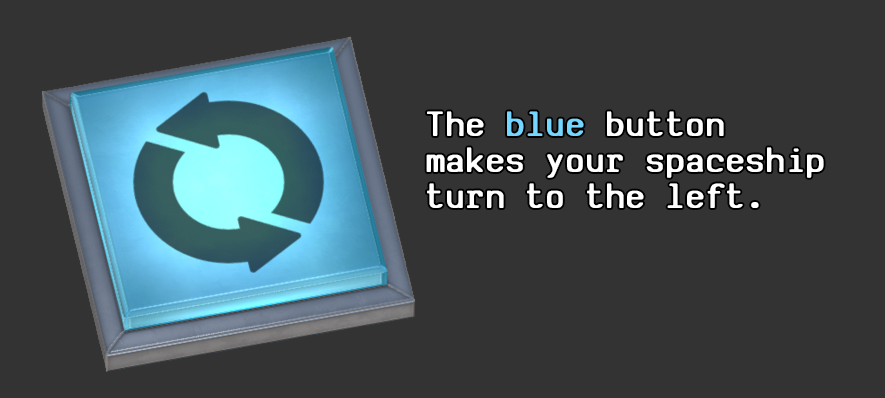
<style>
.page{position:relative;width:885px;height:398px;background:#333333}
.page>*{position:absolute;margin:0}
.t1{font:37.8px/36px "SVBasicManual-Bold";letter-spacing:0.05em;color:#ffffff;scale:0.95 1}
.t2{font:37.8px/36px "SVBasicManual-Bold";letter-spacing:0.05em;color:#75d6ff;scale:0.95 1}
</style>
<div class="page">
<p class="t1" style="left:426px;top:111px;width:398px;height:97px">The <span class="t2">blue</span> button <br>makes your spaceship <br>turn to the left.</p>
</div>
